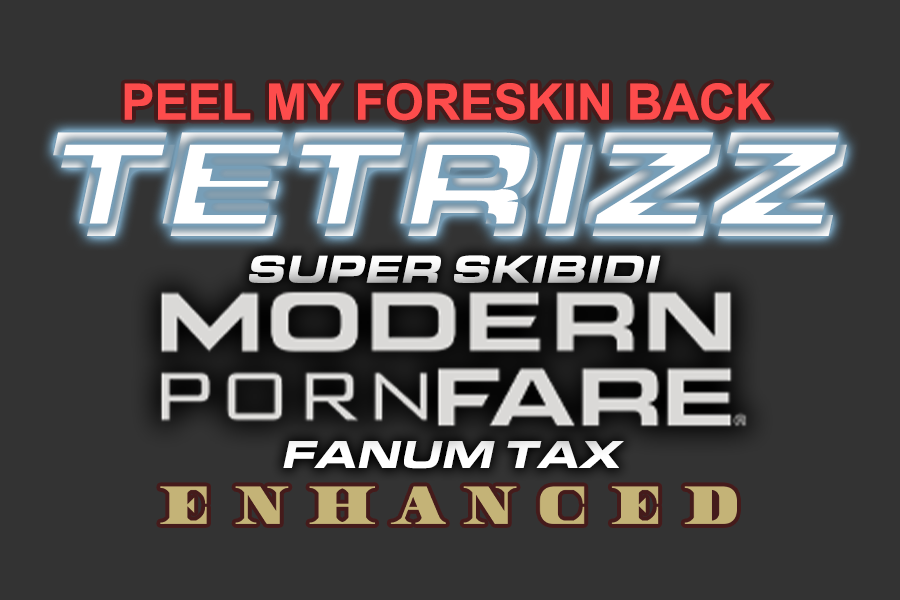
<style>
.page{position:relative;width:900px;height:600px;background:#333333}
.page>*{position:absolute;margin:0}
.t1{font:50px "Arial-BoldMT";color:#fd4c4c}
.t2{font:136.1px "EurostileExt-BlaIta"}
.t3{font:40.2px "EurostileExt-BlaIta"}
.t4{font:40.2px "EurostileExt-BlaIta";color:#ffffff}
</style>
<div class="page">
<p class="t1" style="left:124px;top:83px;width:648px;height:38px">PEEL MY FORESKIN BACK</p>
<p class="t2" style="left:53px;top:132px;width:786px;height:92px">TETRIZZ</p>
<p class="t2" style="left:61px;top:144px;width:786px;height:92px">TETRIZZ</p>
<p class="t3" style="left:249px;top:255px;width:412px;height:28px">SUPER SKIBIDI</p>
<p class="t4" style="left:283px;top:441px;width:341px;height:28px">FANUM TAX</p>
</div>
